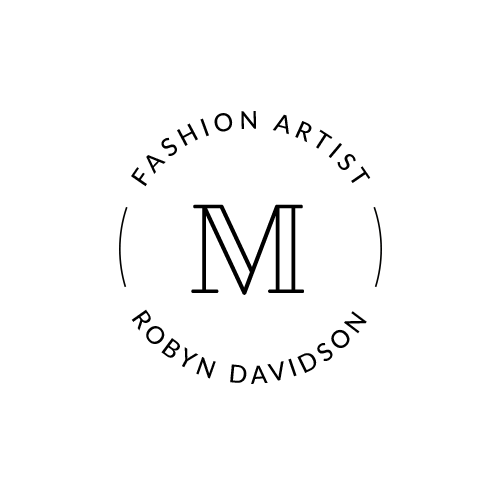
<style>
.page{position:relative;width:500px;height:500px;background:#ffffff}
.page>*{position:absolute;margin:0}
.t1{font:24.5px "Lato-Medium";letter-spacing:0.19em;color:#000000;text-transform:uppercase}
.t2{font:126.1px "Cheque-Regular";color:#000000;text-transform:uppercase}
.t3{font:24.5px "Lato-Medium";letter-spacing:0.2em;color:#000000;text-transform:uppercase}
</style>
<div class="page">
<p class="t1" style="left:131px;top:111px;width:240px;height:76px;text-align:center">FASHION ARTIST</p>
<p class="t2" style="left:191px;top:204px;width:113px;height:91px">M</p>
<p class="t3" style="left:131px;top:309px;width:236px;height:75px;rotate:180deg">ROBYN DAVIDSON</p>
</div>
